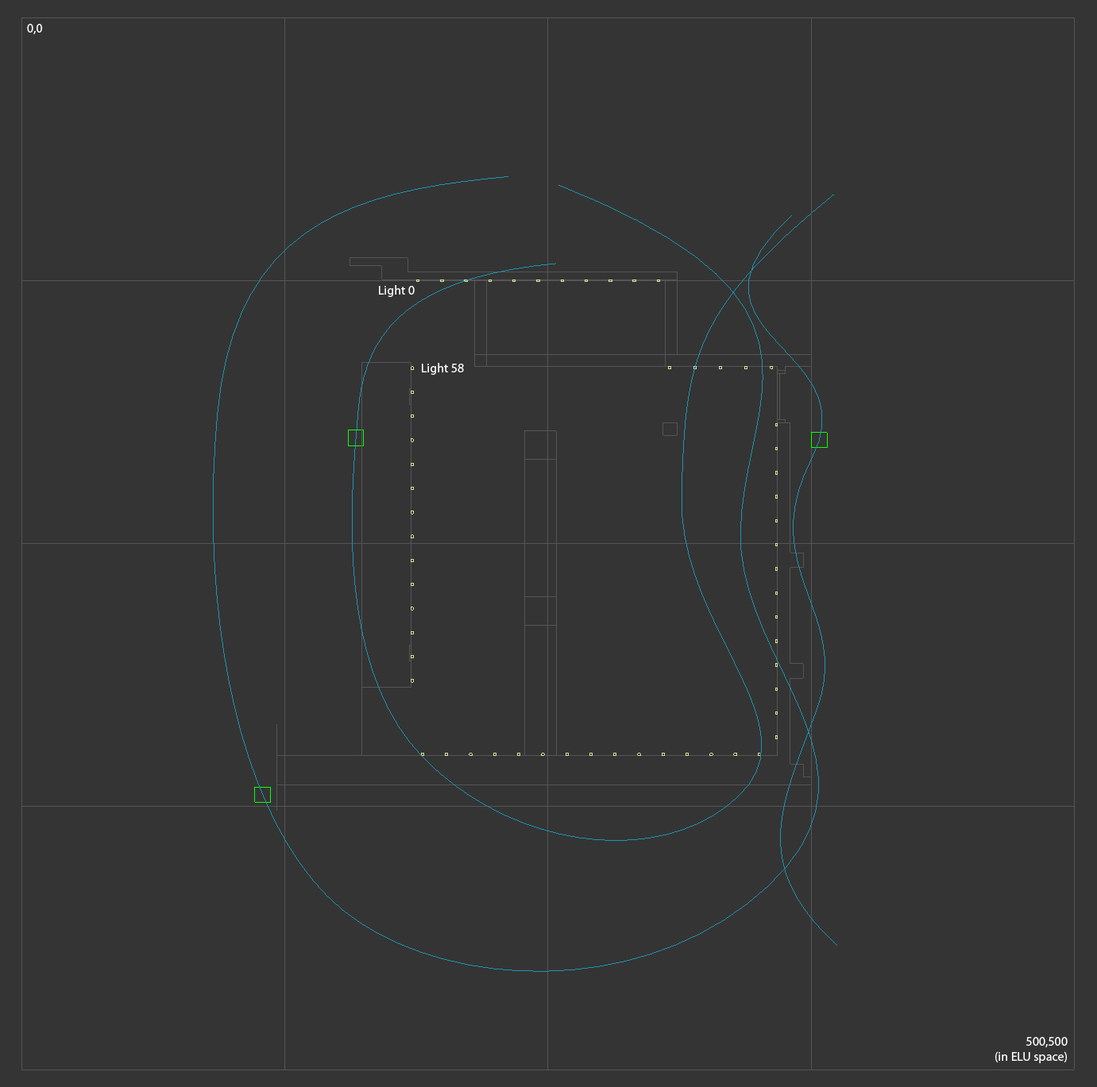
<style>
.page{position:relative;width:1097px;height:1087px;background:#343434}
.page>*{position:absolute;margin:0}
.t1{font:12.7px "MyriadPro-Regular";color:#ffffff}
</style>
<div class="page">
<p class="t1" style="left:27px;top:24px;width:15px;height:11px">0,0</p>
<p class="t1" style="left:379px;top:285px;width:36px;height:12px">Light 0</p>
<p class="t1" style="left:422px;top:363px;width:42px;height:12px">Light 58</p>
<p class="t1" style="left:995px;top:1037px;width:72px;height:26px;text-align:right">500,500<br>(in ELU space)</p>
</div>
